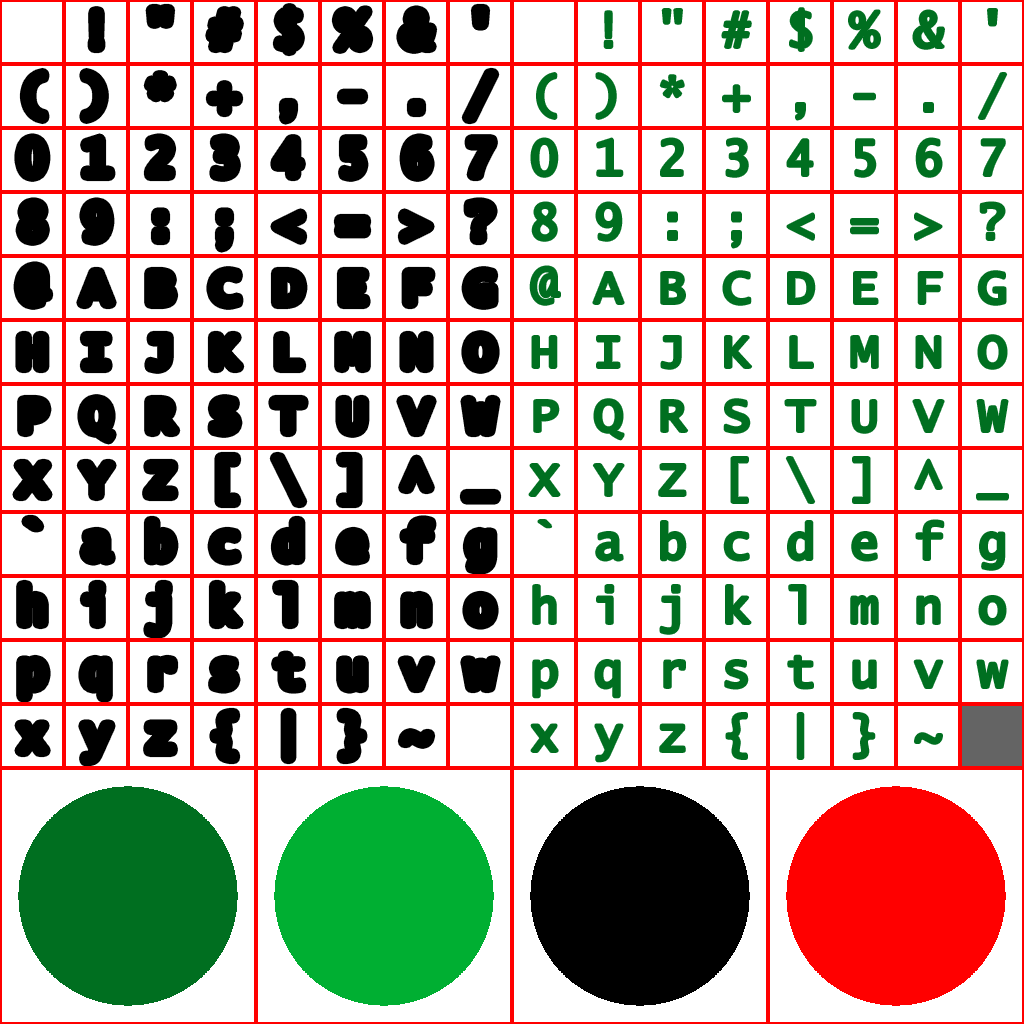
<style>
.page{position:relative;width:1024px;height:1024px;background:#ffffff}
.page>*{position:absolute;margin:0}
.t1{font:48px/64px "LucidaConsole";letter-spacing:0.73em;color:#000000}
.t2{font:48px/64px "LucidaConsole";letter-spacing:0.73em;color:#006f20}
</style>
<div class="page">
<p class="t1" style="left:18px;top:9px;width:477px;height:752px">!"#$%&amp;'<br>()*+,-./<br>01234567<br>89:;&lt;=&gt;?@ABCDEFG<br>HIJKLMNO<br>PQRSTUVW<br>XYZ[\]^_<br>`abcdefg<br>hijklmno<br>pqrstuvw<br>xyz{|}~</p>
<p class="t2" style="left:530px;top:9px;width:477px;height:752px">!"#$%&amp;'<br>()*+,-./<br>01234567<br>89:;&lt;=&gt;?@ABCDEFG<br>HIJKLMNO<br>PQRSTUVW<br>XYZ[\]^_<br>`abcdefg<br>hijklmno<br>pqrstuvw<br>xyz{|}~</p>
</div>
